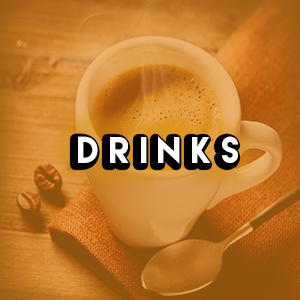
<style>
.page{position:relative;width:300px;height:300px}
.page>*{position:absolute;margin:0}
.t1{font:33.3px "LemonMilk";letter-spacing:0.3em;color:#ffffff}
</style>
<div class="page">
<p class="t1" style="left:78px;top:136px;width:160px;height:28px">DRINKS</p>
</div>
